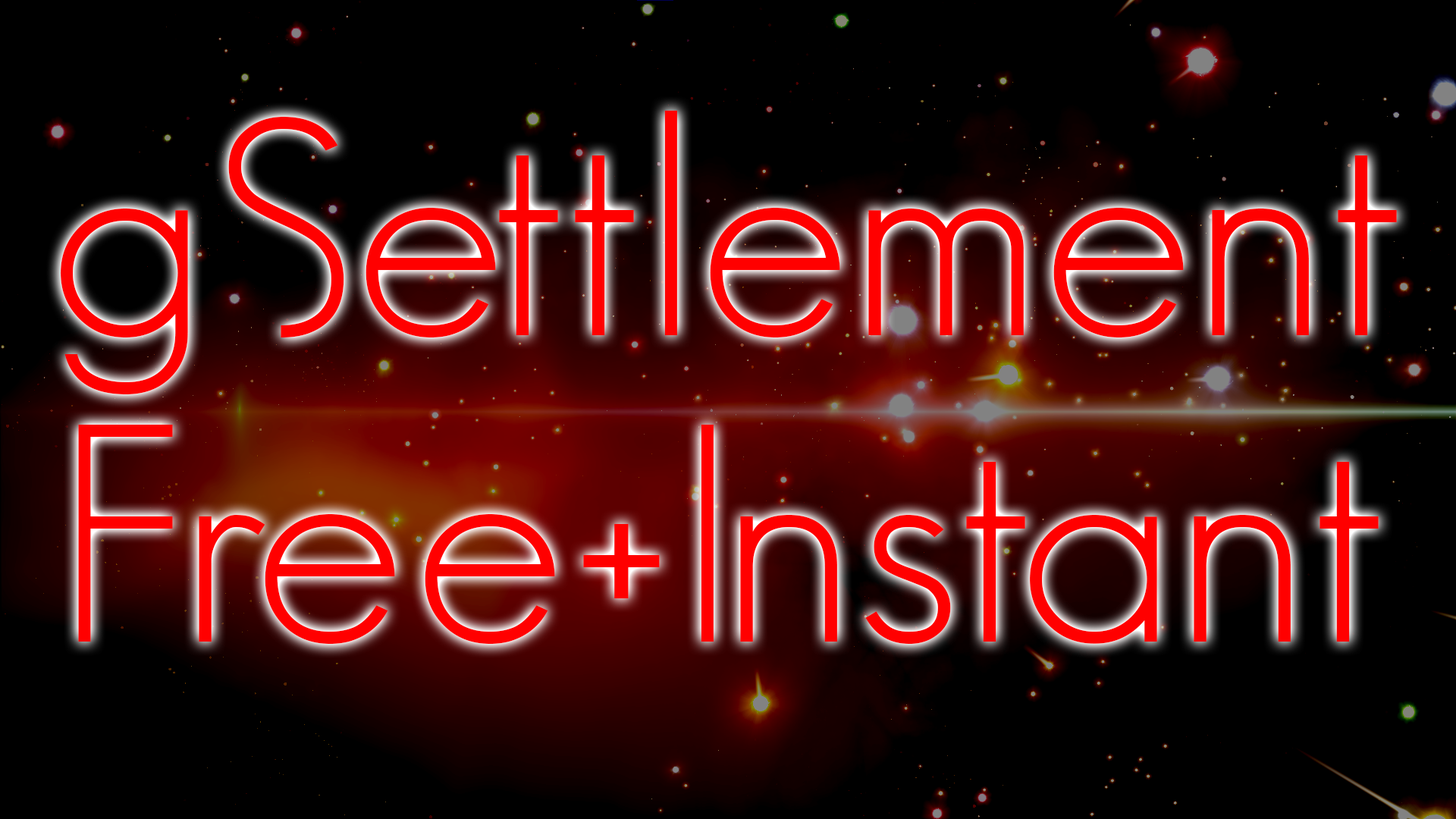
<style>
.page{position:relative;width:1456px;height:819px;background:#000000}
.page>*{position:absolute;margin:0}
.t1{font:303.3px "GeosansLight-NMS";color:#ff0000}
</style>
<div class="page">
<p class="t1" style="left:61px;top:110px;width:1336px;height:284px">gSettlement</p>
<p class="t1" style="left:78px;top:425px;width:1301px;height:219px">Free+Instant</p>
</div>
